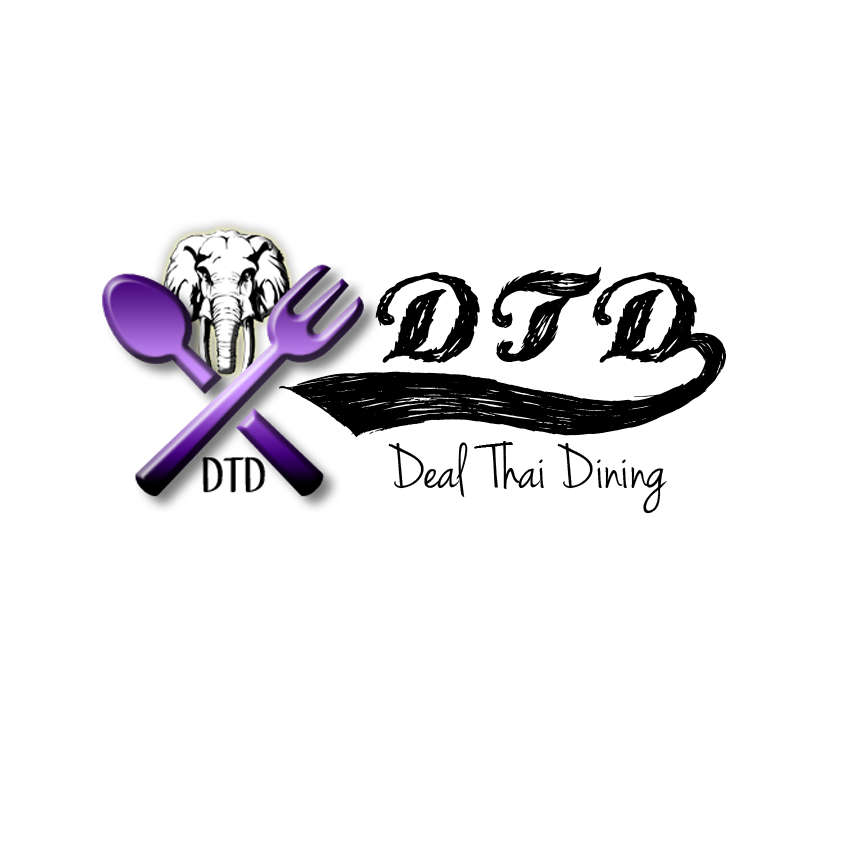
<style>
.page{position:relative;width:850px;height:850px;background:#ffffff}
.page>*{position:absolute;margin:0}
.t1{font:65px "JennaSue";color:#000000}
.t2{font:119px "PlayerOne";color:#000000}
</style>
<div class="page">
<p class="t1" style="left:279px;top:266px;width:448px;height:248px;text-align:center"><span class="t2">D TD[<br><br></span>         Deal  Thai Dining</p>
</div>
